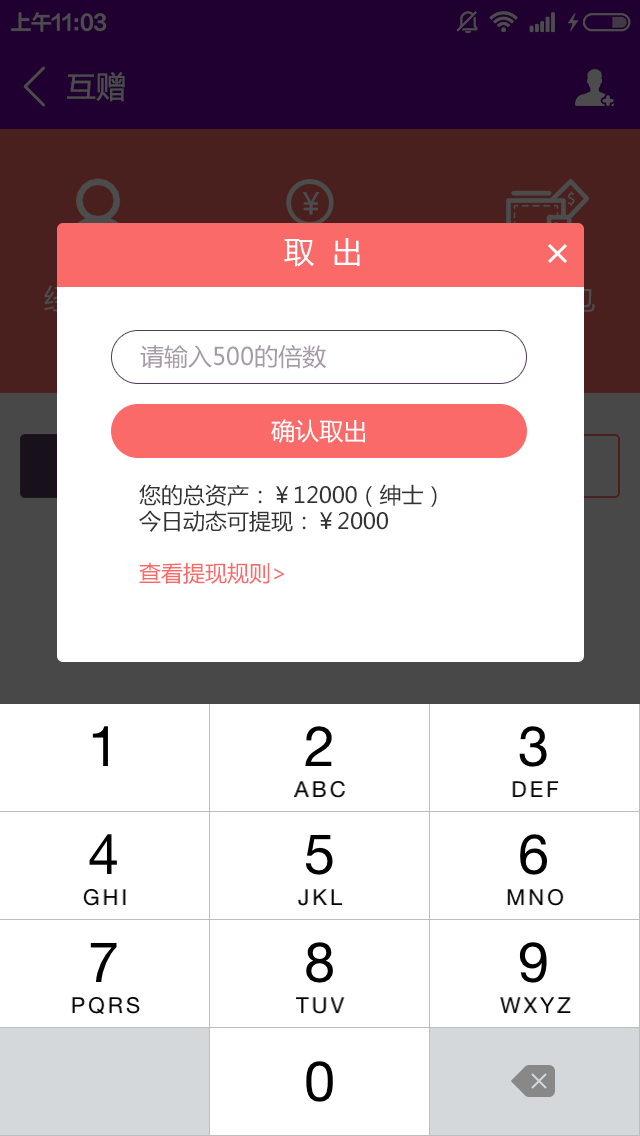
<style>
.page{position:relative;width:640px;height:1136px;background:#ffffff}
.page>*{position:absolute;margin:0}
.t1{font:30px "MicrosoftYaHei";color:#ffffff}
.t2{font:24px "MicrosoftYaHei";color:#a49ba9}
.t3{font:24px "MicrosoftYaHei";color:#ffffff}
.t4{font:22px/26px "MicrosoftYaHei";color:#333333}
.t5{font:22px/26px "MicrosoftYaHei";color:#f96a69}
</style>
<div class="page">
<p class="t1" style="left:284px;top:238px;width:76px;height:29px">取  出</p>
<p class="t2" style="left:140px;top:344px;width:186px;height:25px">请输入500的倍数</p>
<p class="t3" style="left:271px;top:419px;width:94px;height:24px">确认取出</p>
<p class="t4" style="left:139px;top:484px;width:298px;height:100px">您的总资产：￥12000（绅士）<br>今日动态可提现：￥2000<br><br><span class="t5">查看提现规则&gt;</span></p>
</div>
